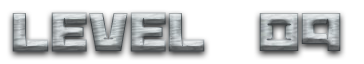
<style>
.page{position:relative;width:364px;height:64px;background:#ffffff}
.page>*{position:absolute;margin:0}
.t1{font:60px "BananaBrick"}
</style>
<div class="page">
<p class="t1" style="left:12px;top:12px;width:329px;height:40px">Level  09</p>
</div>
